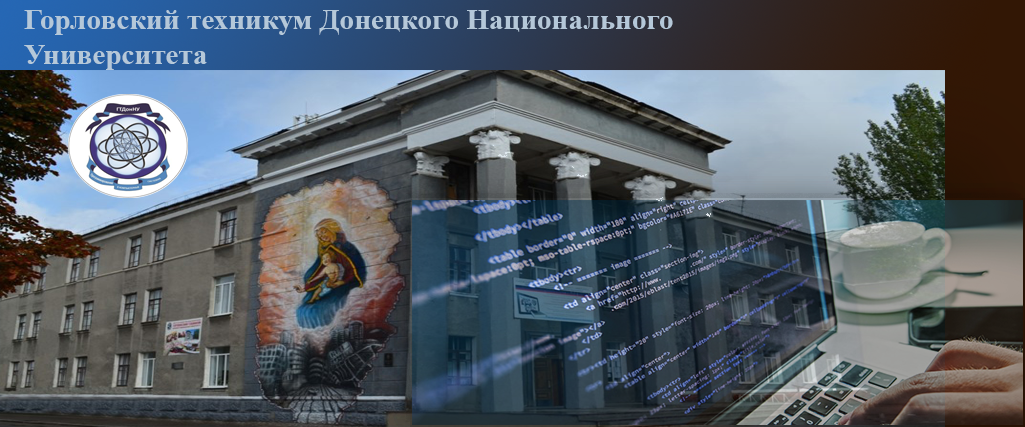
<style>
.page{position:relative;width:1025px;height:427px}
.page>*{position:absolute;margin:0}
.t1{font:29.2px "TimesNewRomanPS-BoldMT";color:#b5c8d9}
</style>
<div class="page">
<p class="t1" style="left:24px;top:10px;width:649px;height:60px">Горловский техникум Донецкого Национального <br>Университета</p>
</div>
